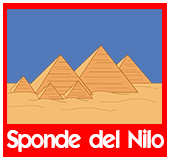
<style>
.page{position:relative;width:170px;height:160px;background:#527aba}
.page>*{position:absolute;margin:0}
.t1{font:24px "ELEGANCE";color:#ffffff}
</style>
<div class="page">
<p class="t1" style="left:7px;top:129px;width:157px;height:23px">Sponde del Nilo</p>
</div>
